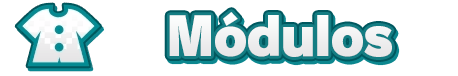
<style>
.page{position:relative;width:458px;height:76px;background:#ffffff}
.page>*{position:absolute;margin:0}
.t1{font:52px "RodinPro-UB";letter-spacing:-0.041em;color:#efeff0}
</style>
<div class="page">
<p class="t1" style="left:169px;top:12px;width:223px;height:45px">Módulos</p>
</div>
